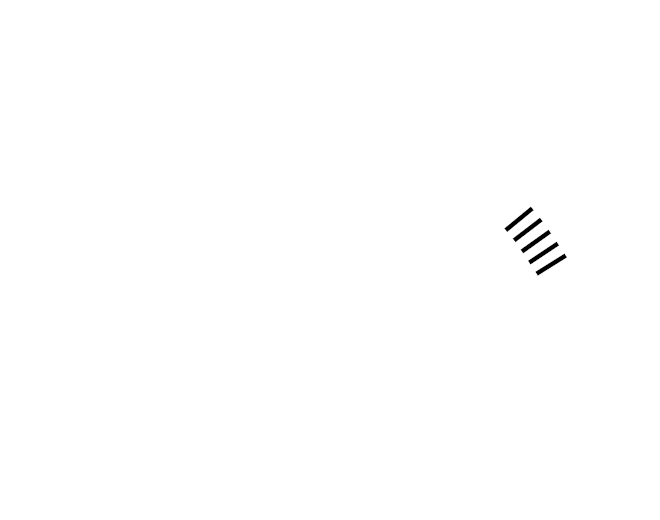
<style>
.page{position:relative;width:660px;height:520px;background:#ffffff}
.page>*{position:absolute;margin:0}
.t1{font:48px "ArialMT";color:#000000}
</style>
<div class="page">
<p class="t1" style="left:504px;top:206px;width:63px;height:70px">IIIII</p>
</div>
